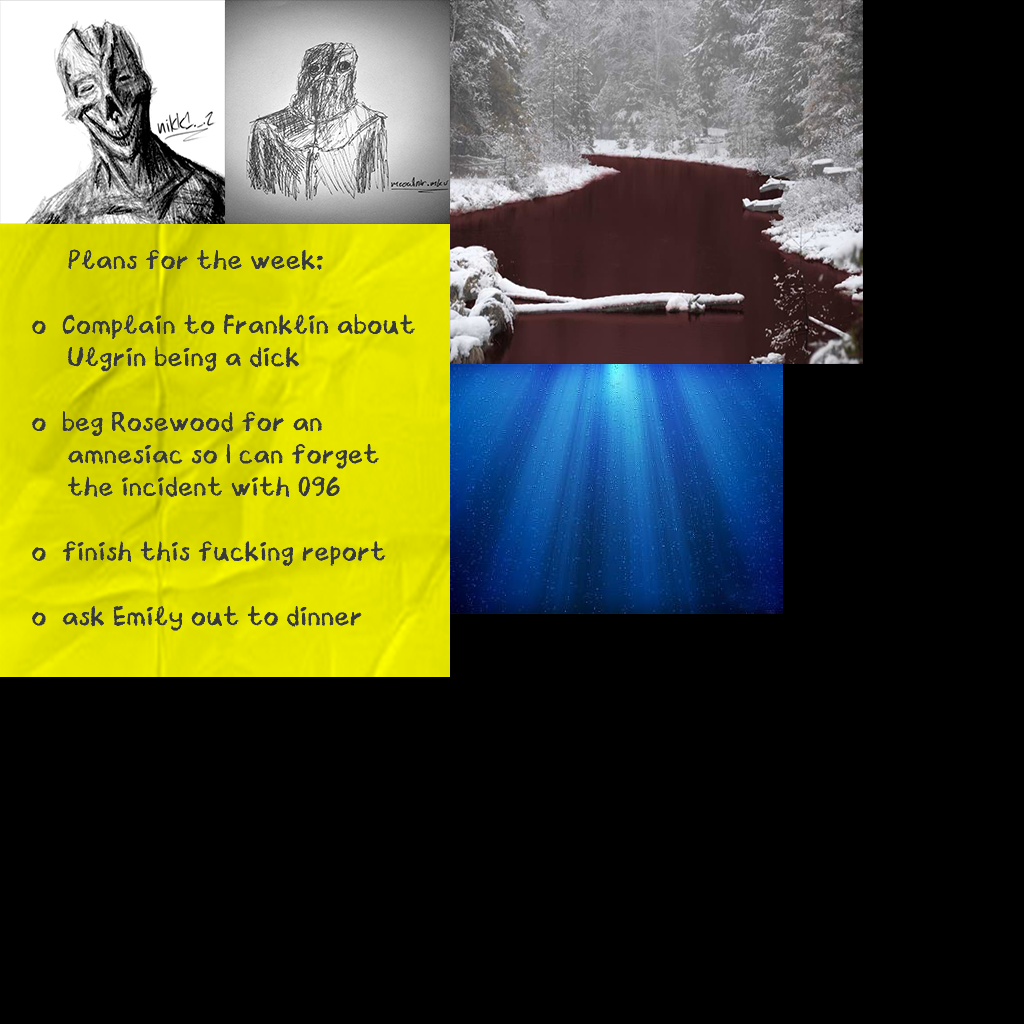
<style>
.page{position:relative;width:1024px;height:1024px;background:#000000}
.page>*{position:absolute;margin:0}
.t1{font:27px "CrayonLibre-Regular";color:#38393a;font-weight:bold}
</style>
<div class="page">
<p class="t1" style="left:32px;top:249px;width:383px;height:382px">Plans for the week:<br><br>o  Complain to Franklin about    Ulgrin being a dick<br><br>o  beg Rosewood for an      amnesiac so I can forget     the incident with 096<br><br>o  finish this fucking report<br><br>o  ask Emily out to dinner</p>
</div>
